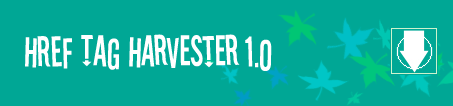
<style>
.page{position:relative;width:453px;height:106px;background:#00a795}
.page>*{position:absolute;margin:0}
.t1{font:48px "Stereofidelic";color:#ffffff}
</style>
<div class="page">
<p class="t1" style="left:25px;top:34px;width:247px;height:37px">HREF Tag Harvester 1.0</p>
</div>
